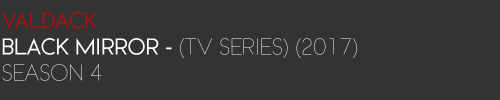
<style>
.page{position:relative;width:500px;height:100px;background:#333333}
.page>*{position:absolute;margin:0}
.t1{font:21.8px "WatchwordThinDemo";color:#ffffff}
.t2{font:21.8px "WatchwordRegularDemo";color:#9f1313}
.t3{font:21.8px "WatchwordRegularDemo";color:#ffffff}
</style>
<div class="page">
<p class="t1" style="left:1px;top:11px;width:356px;height:70px"><span class="t2">VALDACK<br></span><span class="t3">BLACK MIRROR - </span>(TV SERIES) (2017) <br>SEASON 4</p>
</div>
